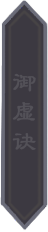
<style>
.page{position:relative;width:48px;height:232px;background:#3c3941}
.page>*{position:absolute;margin:0}
.t1{font:41.6px/9.6px "FZLBJW--GB1-0";letter-spacing:0.2em;color:#535158;font-weight:bold}
</style>
<div class="page">
<p class="t1" style="left:12px;top:73px;width:24px;height:77px">御虚诀</p>
</div>
